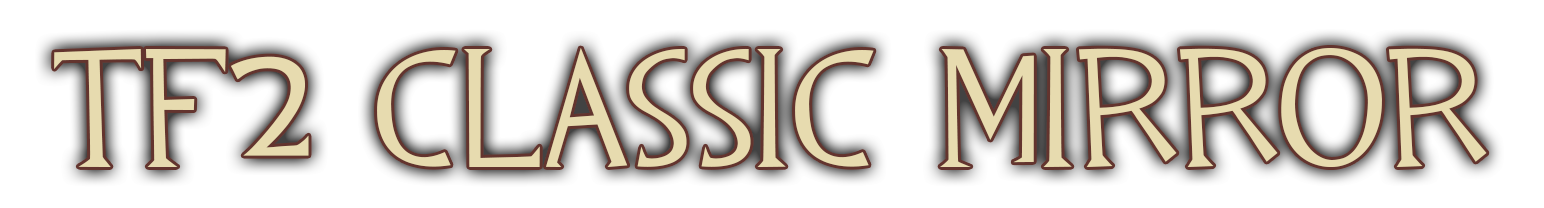
<style>
.page{position:relative;width:1544px;height:208px;background:#ffffff}
.page>*{position:absolute;margin:0}
.t1{font:168.6px "TF2";color:#e8dcaf}
</style>
<div class="page">
<p class="t1" style="left:54px;top:48px;width:1433px;height:119px">TF2 Classic Mirror</p>
</div>
